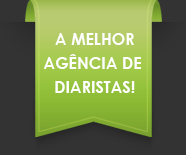
<style>
.page{position:relative;width:186px;height:155px;background:#333333}
.page>*{position:absolute;margin:0}
.t1{font:16px/24px "CenturyGothic-Bold";color:#ffffff}
</style>
<div class="page">
<p class="t1" style="left:44px;top:33px;width:97px;height:60px;text-align:center">A MELHOR<br>AGÊNCIA DE <br>DIARISTAS!</p>
</div>
